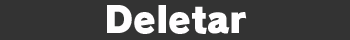
<style>
.page{position:relative;width:350px;height:40px;background:#333333}
.page>*{position:absolute;margin:0}
.t1{font:36px "RodinPro-UB";letter-spacing:-0.002em;color:#fffeff}
</style>
<div class="page">
<p class="t1" style="left:107px;top:5px;width:140px;height:29px">Deletar</p>
</div>
